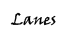
<style>
.page{position:relative;width:66px;height:40px;background:#ffffff}
.page>*{position:absolute;margin:0}
.t1{font:16px "VinerHandITC";color:#000000}
</style>
<div class="page">
<p class="t1" style="left:10px;top:12px;width:46px;height:14px">Lanes</p>
</div>
